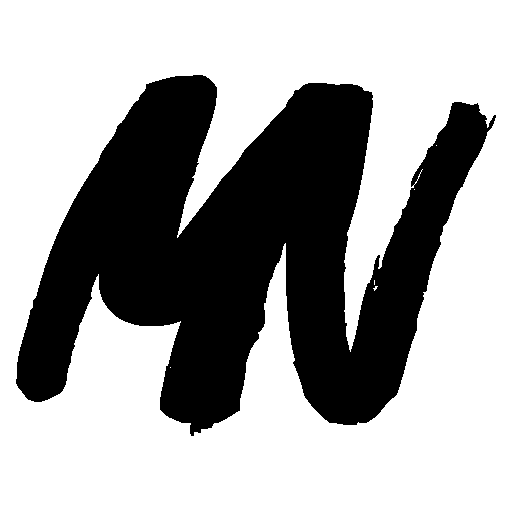
<style>
.page{position:relative;width:512px;height:512px;background:#ffffff}
.page>*{position:absolute;margin:0}
.t1{font:450px "Great-Fighter";letter-spacing:0.025em;color:#000000}
</style>
<div class="page">
<p class="t1" style="left:16px;top:75px;width:347px;height:361px">M</p>
<p class="t1" style="left:160px;top:83px;width:336px;height:342px">N</p>
</div>
